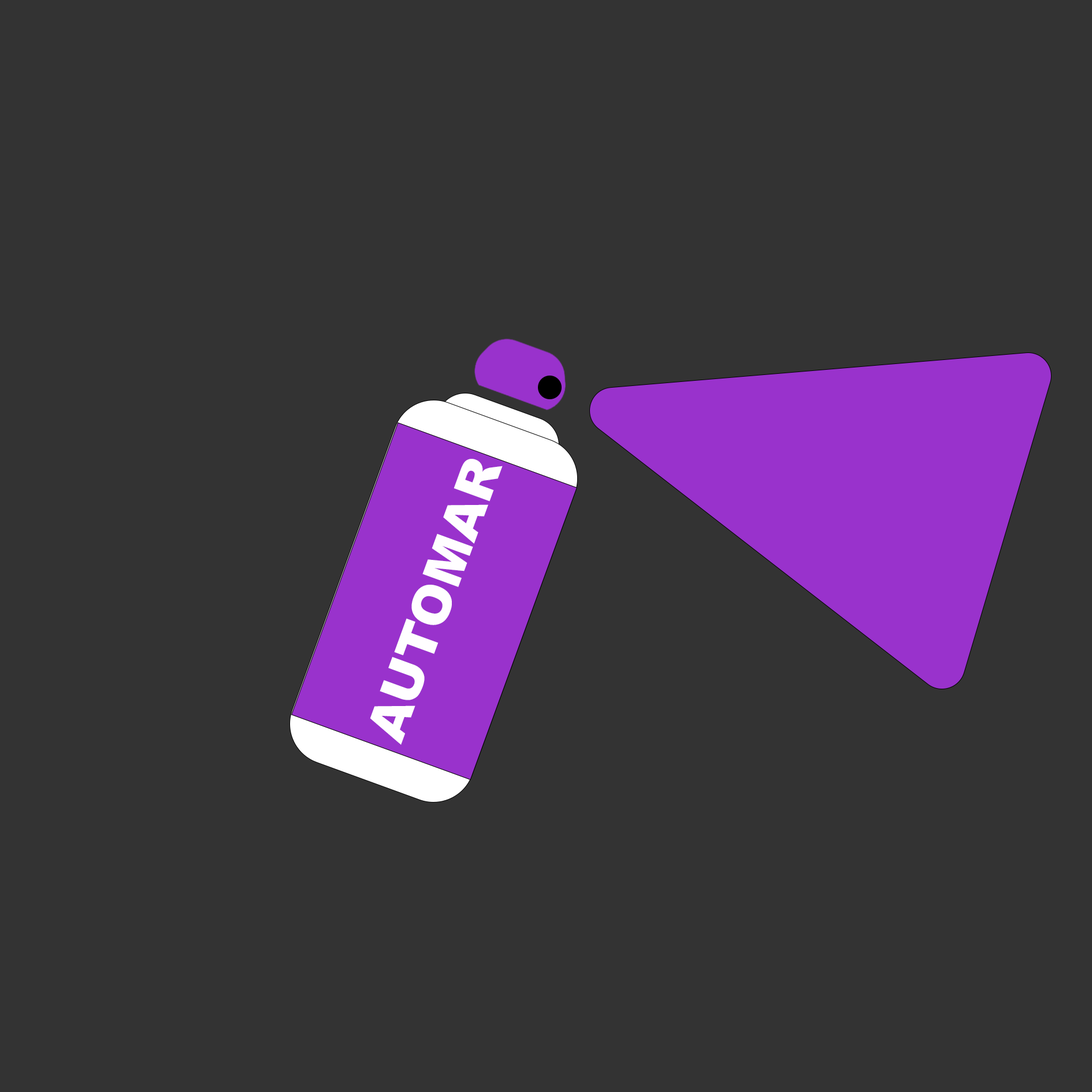
<style>
.page{position:relative;width:1092px;height:1092px;background:#333333}
.page>*{position:absolute;margin:0}
.t1{font:53px "Arial-Black";color:#fffeff}
</style>
<div class="page">
<p class="t1" style="left:370px;top:459px;width:133px;height:286px;rotate:-70deg">AUTOMAR</p>
</div>
